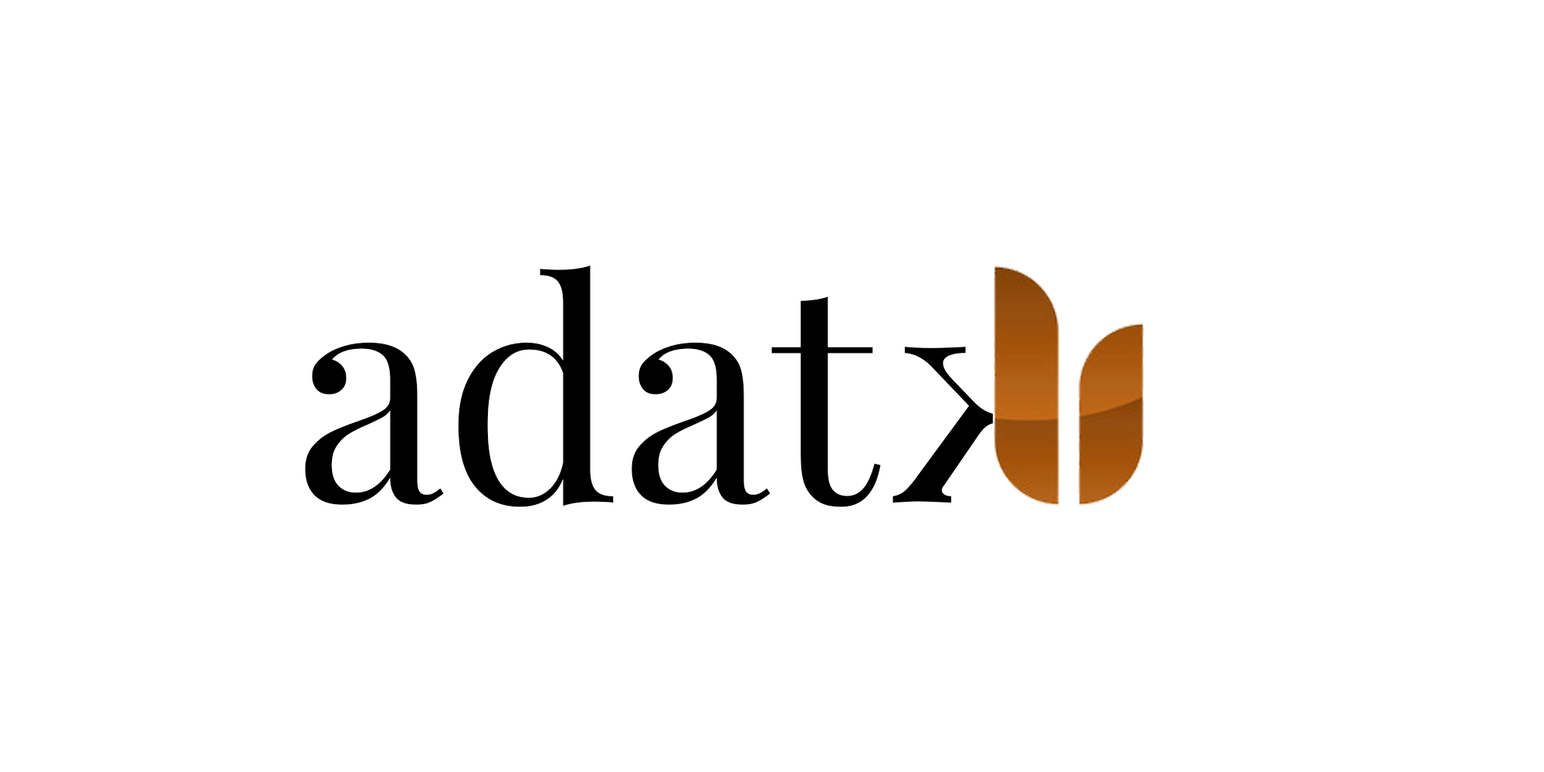
<style>
.page{position:relative;width:1544px;height:772px;background:#ffffff}
.page>*{position:absolute;margin:0}
.t1{font:302.4px "PlayfairDisplay-Regular";color:#000000}
</style>
<div class="page">
<p class="t1" style="left:305px;top:265px;width:576px;height:242px">adat</p>
</div>
